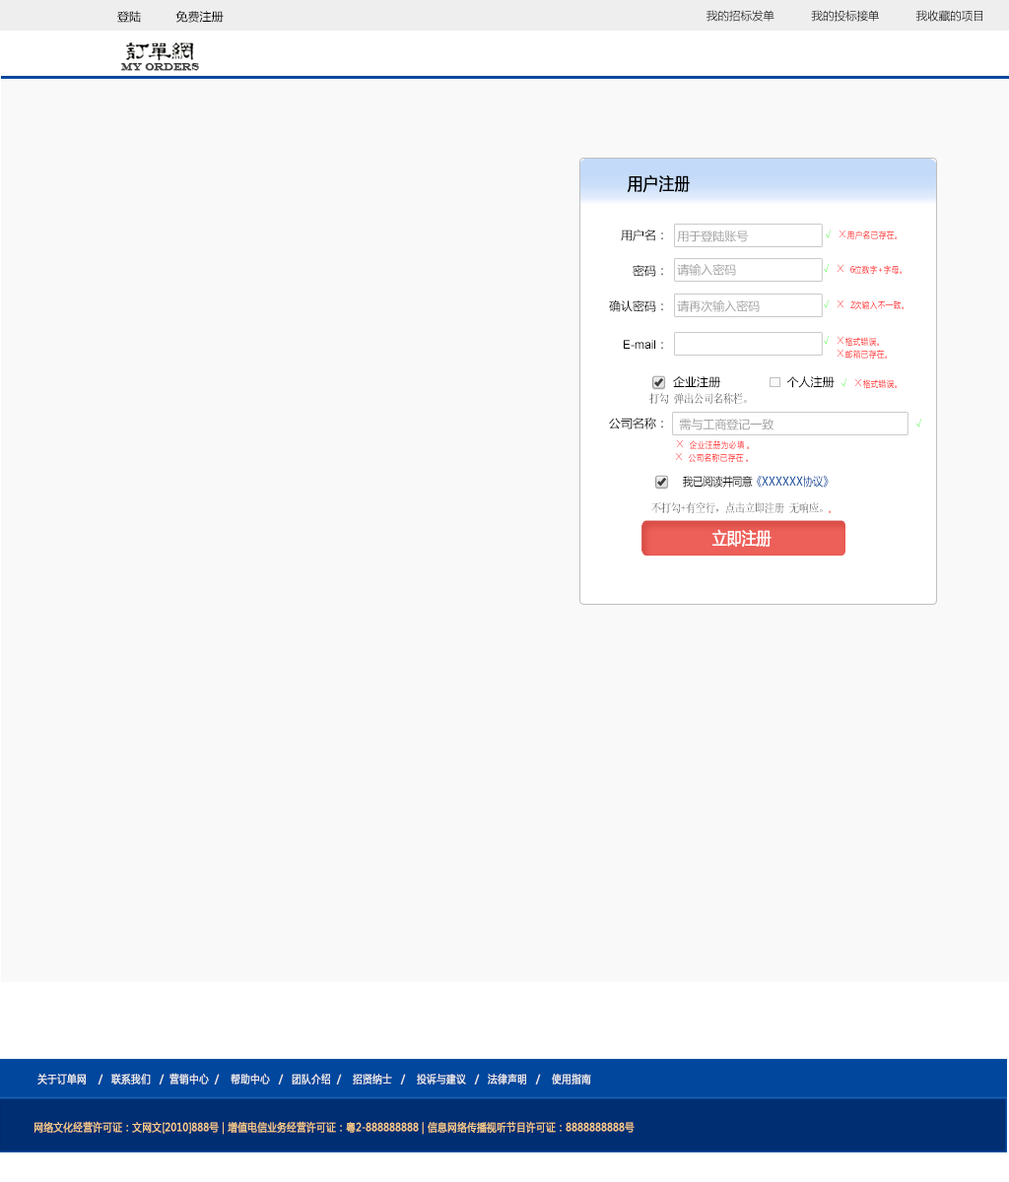
<style>
.page{position:relative;width:1009px;height:1182px;background:#f9f9f9}
.page>*{position:absolute;margin:0}
.t1{font:11.8px "MicrosoftYaHei";color:#000000}
.t2{font:11.3px "MicrosoftYaHei";color:#000000}
.t3{font:10.8px "EngraversMT";color:#434343;font-variant:small-caps;font-weight:bold;scale:0.86 1}
.t4{font:17.3px "MicrosoftYaHei";color:#000000;font-variant:small-caps;font-weight:bold;scale:0.86 1}
.t5{font:11.8px "MicrosoftYaHei";color:#a0a0a0}
.t6{font:8.7px "MicrosoftYaHei";font-variant:small-caps;scale:0.86 1}
.t7{font:11.9px "SimSun";font-variant:small-caps;scale:0.86 1}
.t8{font:11.8px "ArialMT";color:#000000}
.t9{font:11.9px "MicrosoftYaHei";font-variant:small-caps;scale:0.86 1}
.t10{font:17.2px "MicrosoftYaHei";color:#ffffff;font-variant:small-caps;font-weight:bold;scale:0.86 1}
.t11{font:10.8px "MicrosoftYaHei";color:#eeeeee;font-variant:small-caps;font-weight:bold;scale:0.86 1}
.t12{font:15.2px "STXihei";color:#eeeeee;font-variant:small-caps;font-weight:bold;scale:0.86 1}
.t13{font:10.8px "MicrosoftYaHei";color:#facd89;font-variant:small-caps;font-weight:bold;scale:0.87 1}
.t14{font:10.8px "MicrosoftYaHei";color:#eeeeee;font-variant:small-caps;font-weight:bold;scale:0.87 1}
</style>
<div class="page">
<p class="t1" style="left:117px;top:11px;width:107px;height:12px">登陆          免费注册</p>
<p class="t2" style="left:706px;top:10px;width:276px;height:12px">我的招标发单           我的投标接单           我收藏的项目</p>
<p class="t3" style="left:121px;top:63px;width:78px;height:8px">MY ORDERS</p>
<p class="t4" style="left:627px;top:174px;width:63px;height:19px">用户注册</p>
<p class="t1" style="left:621px;top:230px;width:42px;height:11px">用户名：</p>
<p class="t5" style="left:677px;top:231px;width:72px;height:11px">用于登陆账号</p>
<p class="t6" style="left:825px;top:230px;width:71px;height:9px"><span class="t7">√ </span><span class="t7">×</span>用户名已存在。</p>
<p class="t1" style="left:632px;top:265px;width:31px;height:12px">密码：</p>
<p class="t5" style="left:677px;top:264px;width:59px;height:12px">请输入密码</p>
<p class="t6" style="left:823px;top:264px;width:78px;height:10px"><span class="t7">√ </span><span class="t7">× </span>6位数字+字母。</p>
<p class="t1" style="left:609px;top:300px;width:54px;height:12px">确认密码：</p>
<p class="t5" style="left:677px;top:300px;width:83px;height:12px">请再次输入密码</p>
<p class="t6" style="left:823px;top:299px;width:80px;height:10px"><span class="t7">√ </span><span class="t7">× </span>2次输入不一致。</p>
<p class="t8" style="left:624px;top:340px;width:39px;height:9px">E-mail<span class="t1">：</span></p>
<p class="t6" style="left:823px;top:336px;width:56px;height:11px"><span class="t7">√ </span><span class="t7">×</span>格式错误。</p>
<p class="t6" style="left:836px;top:349px;width:51px;height:10px"><span class="t7">   </span><span class="t7">×</span>邮箱已存在。</p>
<p class="t1" style="left:673px;top:376px;width:161px;height:12px">企业注册                   个人注册</p>
<p class="t6" style="left:840px;top:378px;width:56px;height:11px"><span class="t7">√ </span><span class="t7">×</span>格式错误。</p>
<p class="t7" style="left:649px;top:393px;width:98px;height:11px">打勾 弹出公司名称栏。</p>
<p class="t1" style="left:609px;top:418px;width:54px;height:11px">公司名称：</p>
<p class="t5" style="left:679px;top:419px;width:95px;height:11px">需与工商登记一致</p>
<p class="t7" style="left:915px;top:419px;width:6px;height:9px">√</p>
<p class="t6" style="left:676px;top:439px;width:73px;height:10px"><span class="t7">   </span><span class="t7">× </span>企业注册为必填 。</p>
<p class="t6" style="left:675px;top:452px;width:73px;height:11px"><span class="t7">   </span><span class="t7">× </span>公司名称已存在 。</p>
<p class="t9" style="left:683px;top:476px;width:145px;height:12px">我已阅读并同意《XXXXXX协议》</p>
<p class="t7" style="left:651px;top:502px;width:179px;height:11px">不打勾+有空行，点击立即注册 无响应。<span class="t6">。</span></p>
<p class="t10" style="left:712px;top:529px;width:59px;height:18px">立即注册</p>
<p class="t11" style="left:37px;top:1073px;width:554px;height:12px"><span class="t12"><br><br></span>关于订单网    /   联系我们   /  营销中心  /    帮助中心   /   团队介绍  /    招贤纳士   /    投诉与建议   /   法律声明   /    使用指南</p>
<p class="t13" style="left:34px;top:1121px;width:600px;height:14px"><span class="t14"> </span>网络文化经营许可证：文网文[2010]888号 | 增值电信业务经营许可证：粤2-888888888 | 信息网络传播视听节目许可证：8888888888号</p>
</div>
